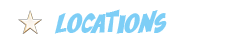
<style>
.page{position:relative;width:250px;height:45px;background:#ffffff}
.page>*{position:absolute;margin:0}
.t1{font:30px "HoustonComicsPersonalUse";color:#7ecef6}
</style>
<div class="page">
<p class="t1" style="left:54px;top:9px;width:113px;height:25px">LOCATIONS</p>
</div>
